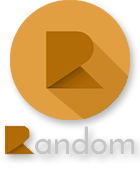
<style>
.page{position:relative;width:140px;height:170px;background:#e29f41}
.page>*{position:absolute;margin:0}
.t1{font:35.4px "ReemKufi-Regular";color:#c5c5c5}
</style>
<div class="page">
<p class="t1" style="left:35px;top:126px;width:100px;height:29px">andom</p>
</div>
